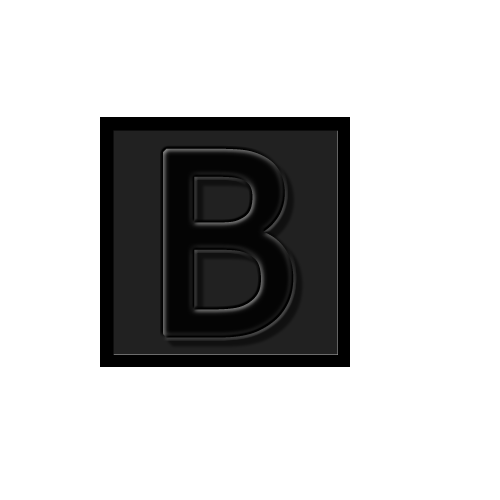
<style>
.page{position:relative;width:500px;height:500px;background:#ffffff}
.page>*{position:absolute;margin:0}
.t1{font:250px "Tahoma";color:#040404;font-weight:bold}
</style>
<div class="page">
<p class="t1" style="left:163px;top:148px;width:131px;height:190px">В</p>
</div>
